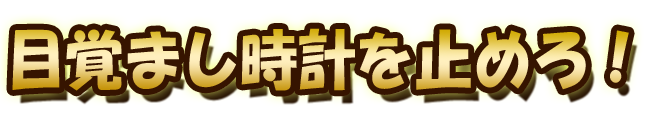
<style>
.page{position:relative;width:647px;height:123px;background:#ffffff}
.page>*{position:absolute;margin:0}
.t1{font:64.8px "HGSoeiKakupoptai";scale:0.9 1}
</style>
<div class="page">
<p class="t1" style="left:12px;top:28px;width:617px;height:63px">目覚まし時計を止めろ！</p>
</div>
